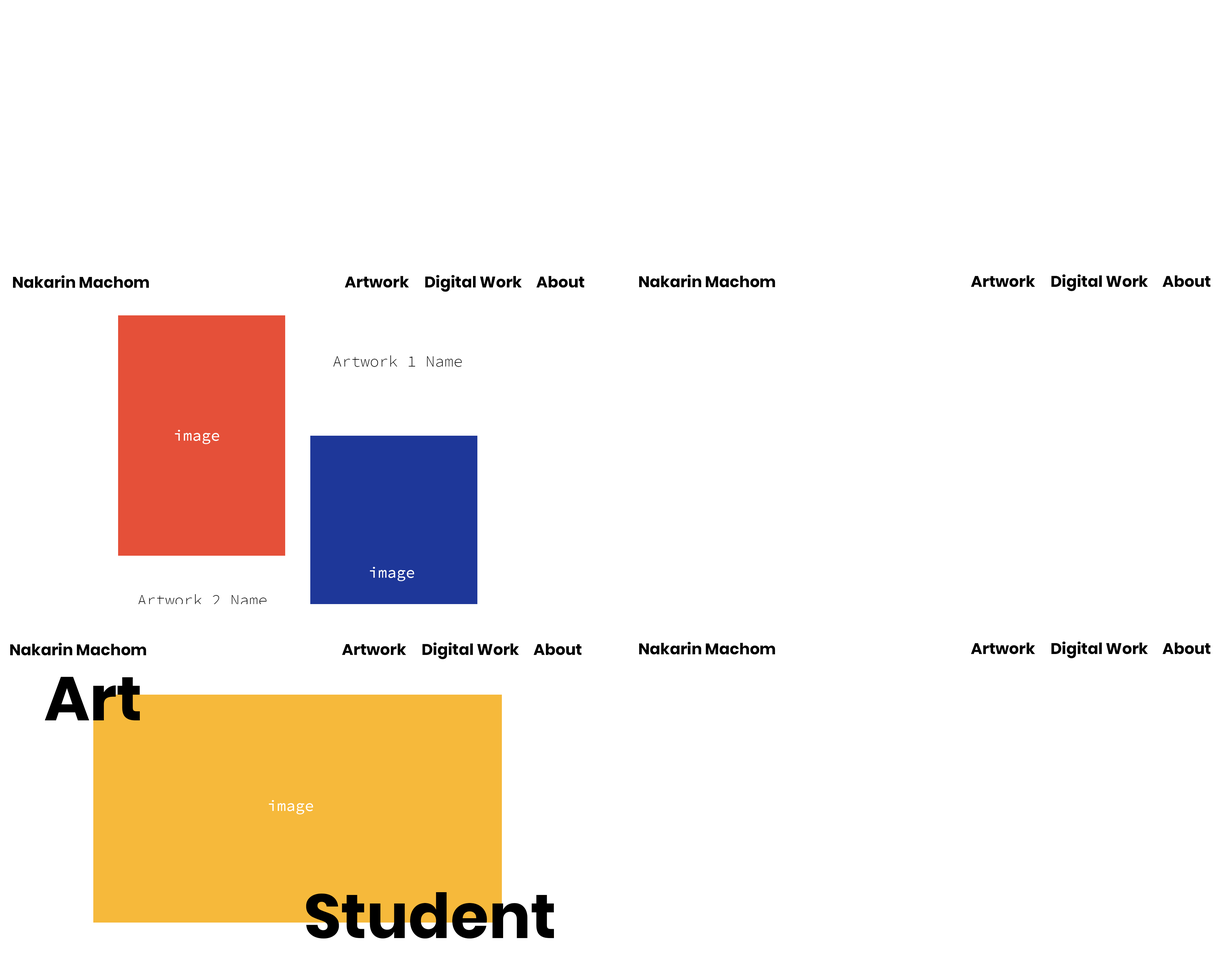
<style>
.page{position:relative;width:1230px;height:970px;background:#ffffff}
.page>*{position:absolute;margin:0}
.t1{font:15.5px "Poppins-Bold";color:#000000}
.t2{font:15.5px "SourceCodePro-Light";color:#000000}
.t3{font:15.5px "SourceCodePro-Regular";color:#ffffff}
.t4{font:62px "Poppins-Bold";color:#000000}
</style>
<div class="page">
<p class="t1" style="left:13px;top:275px;width:136px;height:13px">Nakarin Machom</p>
<p class="t1" style="left:345px;top:276px;width:64px;height:12px">Artwork</p>
<p class="t1" style="left:425px;top:275px;width:97px;height:17px">Digital Work</p>
<p class="t1" style="left:536px;top:276px;width:48px;height:12px">About</p>
<p class="t1" style="left:639px;top:274px;width:136px;height:13px">Nakarin Machom</p>
<p class="t1" style="left:971px;top:275px;width:64px;height:12px">Artwork</p>
<p class="t1" style="left:1051px;top:274px;width:97px;height:17px">Digital Work</p>
<p class="t1" style="left:1162px;top:275px;width:48px;height:12px">About</p>
<p class="t2" style="left:333px;top:355px;width:129px;height:12px">Artwork 1 Name</p>
<p class="t3" style="left:175px;top:430px;width:44px;height:14px">image</p>
<p class="t3" style="left:370px;top:567px;width:44px;height:14px">image</p>
<p class="t2" style="left:138px;top:594px;width:129px;height:11px">Artwork 2 Name</p>
<p class="t1" style="left:422px;top:642px;width:97px;height:17px">Digital Work</p>
<p class="t1" style="left:639px;top:641px;width:136px;height:13px">Nakarin Machom</p>
<p class="t1" style="left:1051px;top:641px;width:97px;height:17px">Digital Work</p>
<p class="t1" style="left:10px;top:642px;width:136px;height:13px">Nakarin Machom</p>
<p class="t1" style="left:342px;top:643px;width:64px;height:12px">Artwork</p>
<p class="t1" style="left:533px;top:643px;width:48px;height:12px">About</p>
<p class="t1" style="left:971px;top:642px;width:64px;height:12px">Artwork</p>
<p class="t1" style="left:1162px;top:642px;width:48px;height:12px">About</p>
<p class="t4" style="left:45px;top:676px;width:95px;height:44px">Art</p>
<p class="t3" style="left:269px;top:800px;width:44px;height:14px">image</p>
<p class="t4" style="left:306px;top:892px;width:248px;height:46px">Student</p>
</div>
